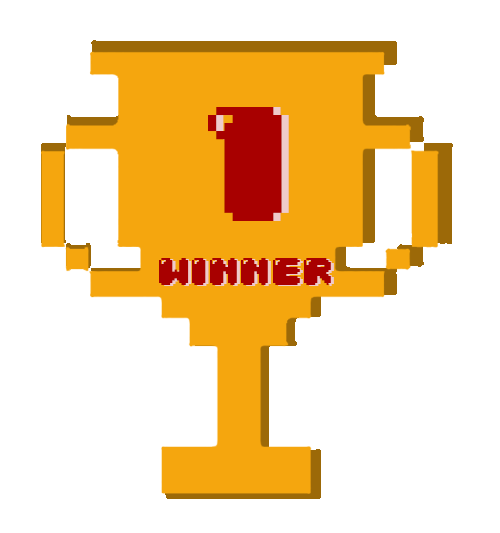
<style>
.page{position:relative;width:500px;height:533px;background:#ffffff}
.page>*{position:absolute;margin:0}
.t1{font:138.9px "04b30";color:#a80000}
.t2{font:38.1px "04b30";color:#a80000}
</style>
<div class="page">
<p class="t1" style="left:208px;top:107px;width:74px;height:114px">1</p>
<p class="t1" style="left:215px;top:107px;width:74px;height:114px">1</p>
<p class="t2" style="left:159px;top:258px;width:172px;height:27px">winner</p>
</div>
